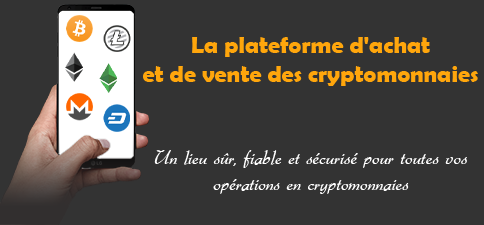
<style>
.page{position:relative;width:484px;height:225px;background:#333333}
.page>*{position:absolute;margin:0}
.t1{font:24px "BerlinSansFBDemi-Bold";color:#ffa60c}
.t2{font:21.3px "Gabrielle";color:#ffffff}
</style>
<div class="page">
<p class="t1" style="left:143px;top:37px;width:335px;height:49px;text-align:center">La plateforme d'achat <br>et de vente des cryptomonnaies</p>
<p class="t2" style="left:154px;top:150px;width:313px;height:44px;text-align:center">Un lieu sûr, fiable et sécurisé pour toutes vos opérations en cryptomonnaies</p>
</div>
